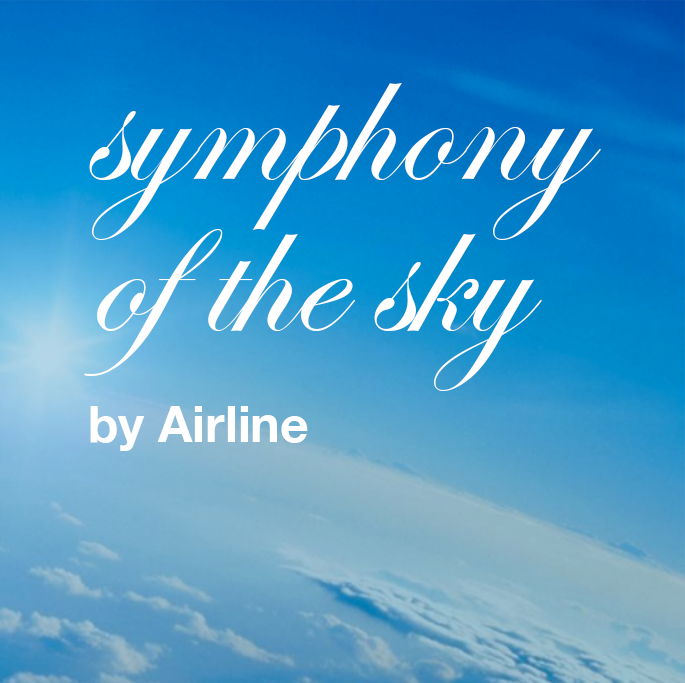
<style>
.page{position:relative;width:685px;height:683px}
.page>*{position:absolute;margin:0}
.t1{font:190px/151px "EdwardianScriptITC";color:#ffffff}
.t2{font:50px "HelveticaNeue-Bold";color:#ffffff}
</style>
<div class="page">
<p class="t1" style="left:84px;top:83px;width:517px;height:308px">symphony<br>of the sky</p>
<p class="t2" style="left:90px;top:406px;width:218px;height:45px">by Airline</p>
</div>
